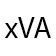
<style>
.page{position:relative;width:56px;height:56px;background:#ffffff}
.page>*{position:absolute;margin:0}
.t1{font:30px "MyriadPro-Regular";color:#000000}
</style>
<div class="page">
<p class="t1" style="left:4px;top:17px;width:47px;height:21px">xVA</p>
</div>
